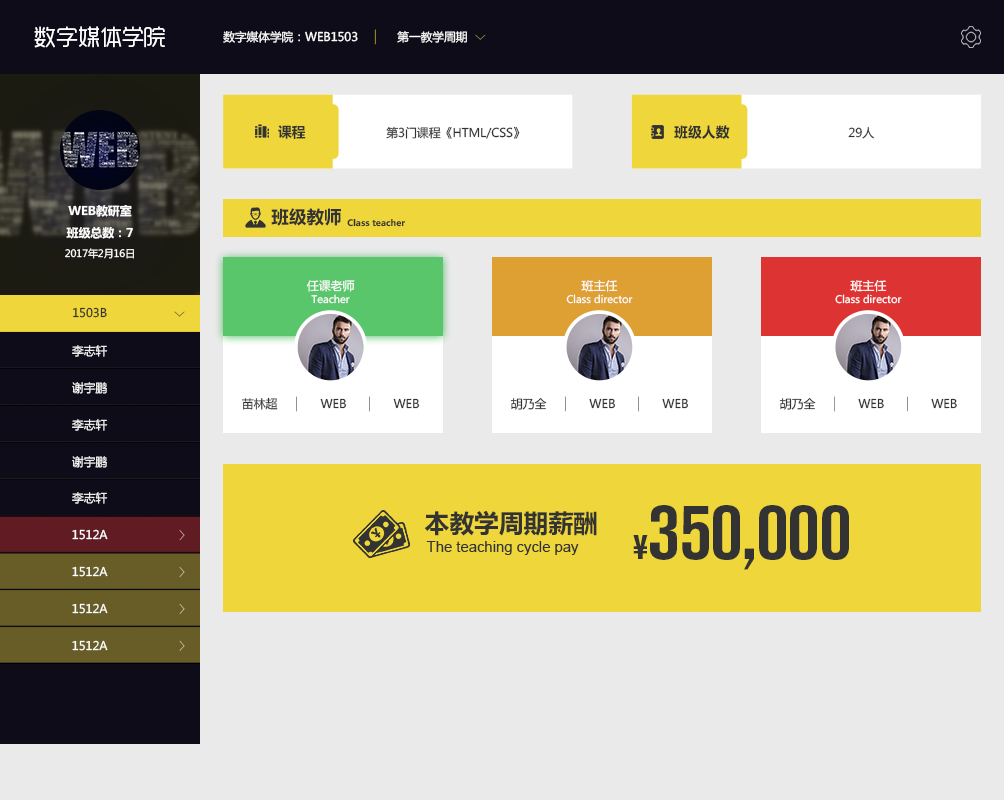
<style>
.page{position:relative;width:1004px;height:800px;background:#eaeaea}
.page>*{position:absolute;margin:0}
.t1{font:22.1px "RTWSYueGoTrial-Regular";color:#ffffff}
.t2{font:11.8px "MicrosoftYaHei";color:#ffffff}
.t3{font:14px "MicrosoftYaHei-Bold";color:#333333}
.t4{font:12px "MicrosoftYaHei";color:#333333}
.t5{font:12px "MicrosoftYaHei-Bold";color:#ffffff}
.t6{font:17.7px "MicrosoftYaHei-Bold";color:#333333}
.t7{font:8.9px "MicrosoftYaHei-Bold";color:#333333}
.t8{font:10px "MicrosoftYaHei";color:#ffffff}
.t9{font:12px "MicrosoftYaHei";color:#ffffff}
.t10{font:10.3px "MicrosoftYaHei";color:#ffffff}
.t11{font:11.8px "MicrosoftYaHei";color:#333333}
.t12{font:25px "MicrosoftYaHei-Bold";color:#333333}
.t13{font:80px "AkzidenzGroteskBQ-BdCndAlt";color:#333333}
.t14{font:36px "AkzidenzGroteskBQ-BdCndAlt";color:#333333}
.t15{font:15px "ArialMT";color:#333333}
</style>
<div class="page">
<p class="t1" style="left:34px;top:26px;width:131px;height:22px">数字媒体学院</p>
<p class="t2" style="left:223px;top:31px;width:135px;height:12px">数字媒体学院：WEB1503</p>
<p class="t2" style="left:397px;top:31px;width:70px;height:12px">第一教学周期</p>
<p class="t3" style="left:278px;top:125px;width:28px;height:14px">课程</p>
<p class="t4" style="left:386px;top:126px;width:134px;height:13px">第3门课程《HTML/CSS》</p>
<p class="t3" style="left:674px;top:125px;width:56px;height:14px">班级人数</p>
<p class="t4" style="left:848px;top:127px;width:26px;height:12px">29人</p>
<p class="t5" style="left:68px;top:205px;width:64px;height:12px">WEB教研室</p>
<p class="t6" style="left:271px;top:208px;width:70px;height:18px">班级教师</p>
<p class="t7" style="left:347px;top:218px;width:58px;height:9px">Class teacher</p>
<p class="t5" style="left:66px;top:226px;width:67px;height:13px">班级总数：7</p>
<p class="t8" style="left:65px;top:248px;width:69px;height:11px">2017年2月16日</p>
<p class="t9" style="left:306px;top:279px;width:49px;height:13px">任课老师</p>
<p class="t9" style="left:581px;top:279px;width:37px;height:13px">班主任</p>
<p class="t9" style="left:850px;top:280px;width:37px;height:12px">班主任</p>
<p class="t10" style="left:311px;top:294px;width:39px;height:10px">Teacher</p>
<p class="t10" style="left:566px;top:294px;width:67px;height:10px">Class director</p>
<p class="t10" style="left:835px;top:294px;width:67px;height:10px">Class director</p>
<p class="t11" style="left:73px;top:307px;width:34px;height:11px">1503B</p>
<p class="t2" style="left:72px;top:345px;width:36px;height:12px">李志轩</p>
<p class="t2" style="left:72px;top:382px;width:35px;height:12px">谢宇鹏</p>
<p class="t4" style="left:241px;top:397px;width:37px;height:13px">苗林超</p>
<p class="t4" style="left:320px;top:398px;width:27px;height:11px">WEB</p>
<p class="t4" style="left:393px;top:398px;width:27px;height:11px">WEB</p>
<p class="t4" style="left:510px;top:398px;width:37px;height:12px">胡乃全</p>
<p class="t4" style="left:589px;top:398px;width:27px;height:11px">WEB</p>
<p class="t4" style="left:662px;top:398px;width:27px;height:11px">WEB</p>
<p class="t4" style="left:779px;top:398px;width:37px;height:12px">胡乃全</p>
<p class="t4" style="left:858px;top:398px;width:26px;height:11px">WEB</p>
<p class="t4" style="left:931px;top:398px;width:26px;height:11px">WEB</p>
<p class="t2" style="left:72px;top:419px;width:36px;height:12px">李志轩</p>
<p class="t2" style="left:72px;top:456px;width:35px;height:12px">谢宇鹏</p>
<p class="t2" style="left:72px;top:492px;width:36px;height:12px">李志轩</p>
<p class="t12" style="left:424px;top:510px;width:173px;height:26px">本教学周期薪酬</p>
<p class="t13" style="left:633px;top:505px;width:216px;height:65px"><span class="t14">¥</span>350,000</p>
<p class="t2" style="left:72px;top:529px;width:36px;height:11px">1512A</p>
<p class="t15" style="left:426px;top:541px;width:153px;height:14px">The teaching cycle pay</p>
<p class="t2" style="left:72px;top:566px;width:36px;height:11px">1512A</p>
<p class="t2" style="left:72px;top:603px;width:36px;height:11px">1512A</p>
<p class="t2" style="left:72px;top:640px;width:36px;height:11px">1512A</p>
</div>
